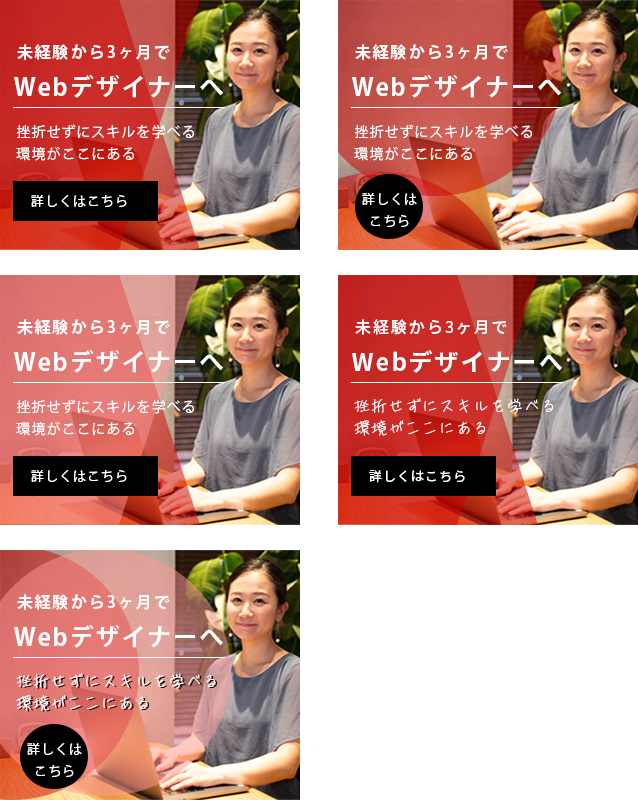
<style>
.page{position:relative;width:638px;height:800px;background:#ffffff}
.page>*{position:absolute;margin:0}
.t1{font:16px "KozGoPr6N-Bold";letter-spacing:0.1em;color:#ffffff}
.t2{font:24px "KozGoPr6N-Bold";letter-spacing:0.08em;color:#ffffff}
.t3{font:14px/22.4px "KozGoPr6N-Regular";letter-spacing:0.08em;color:#ffffff}
.t4{font:13px "KozGoPr6N-Regular";letter-spacing:0.1em;color:#ffffff}
.t5{font:13px/22.4px "KozGoPr6N-Regular";letter-spacing:0.1em;color:#ffffff}
.t6{font:16px "SourceHanSansJP-Medium";letter-spacing:0.1em;color:#ffffff}
.t7{font:24px "SourceHanSansJP-Bold";letter-spacing:0.08em;color:#ffffff}
.t8{font:16px/22.4px "TA-koigokoro";letter-spacing:0.08em;color:#ffffff}
.t9{font:13px "SourceHanSansJP-Regular";letter-spacing:0.1em;color:#ffffff}
.t10{font:16px/22.4px "TA-koigokoro";letter-spacing:0.08em}
</style>
<div class="page">
<p class="t1" style="left:17px;top:44px;width:153px;height:16px">未経験から3ヶ月で</p>
<p class="t1" style="left:355px;top:44px;width:153px;height:16px">未経験から3ヶ月で</p>
<p class="t2" style="left:14px;top:74px;width:209px;height:24px">Webデザイナーへ</p>
<p class="t2" style="left:352px;top:74px;width:209px;height:24px">Webデザイナーへ</p>
<p class="t3" style="left:16px;top:124px;width:178px;height:37px">挫折せずにスキルを学べる<br>環境がここにある</p>
<p class="t3" style="left:354px;top:124px;width:178px;height:37px">挫折せずにスキルを学べる<br>環境がここにある</p>
<p class="t4" style="left:31px;top:195px;width:96px;height:12px">詳しくはこちら</p>
<p class="t5" style="left:362px;top:193px;width:55px;height:34px;text-align:center">詳しくは<br>こちら</p>
<p class="t1" style="left:17px;top:319px;width:153px;height:16px">未経験から3ヶ月で</p>
<p class="t6" style="left:355px;top:319px;width:152px;height:16px">未経験から3ヶ月で</p>
<p class="t2" style="left:14px;top:349px;width:209px;height:24px">Webデザイナーへ</p>
<p class="t7" style="left:352px;top:350px;width:210px;height:23px">Webデザイナーへ</p>
<p class="t3" style="left:16px;top:399px;width:178px;height:37px">挫折せずにスキルを学べる<br>環境がここにある</p>
<p class="t8" style="left:354px;top:398px;width:200px;height:38px">挫折せずにスキルを学べる<br>環境がここにある</p>
<p class="t4" style="left:31px;top:470px;width:96px;height:12px">詳しくはこちら</p>
<p class="t9" style="left:369px;top:470px;width:96px;height:13px">詳しくはこちら</p>
<p class="t1" style="left:17px;top:594px;width:153px;height:16px">未経験から3ヶ月で</p>
<p class="t2" style="left:14px;top:624px;width:209px;height:24px">Webデザイナーへ</p>
<p class="t8" style="left:16px;top:673px;width:200px;height:38px">挫折せずにスキルを学べる<br>環境がここにある</p>
<p class="t10" style="left:18px;top:674px;width:200px;height:38px">挫折せずにスキルを学べる<br>環境がここにある</p>
<p class="t5" style="left:27px;top:743px;width:55px;height:34px;text-align:center">詳しくは<br>こちら</p>
</div>
